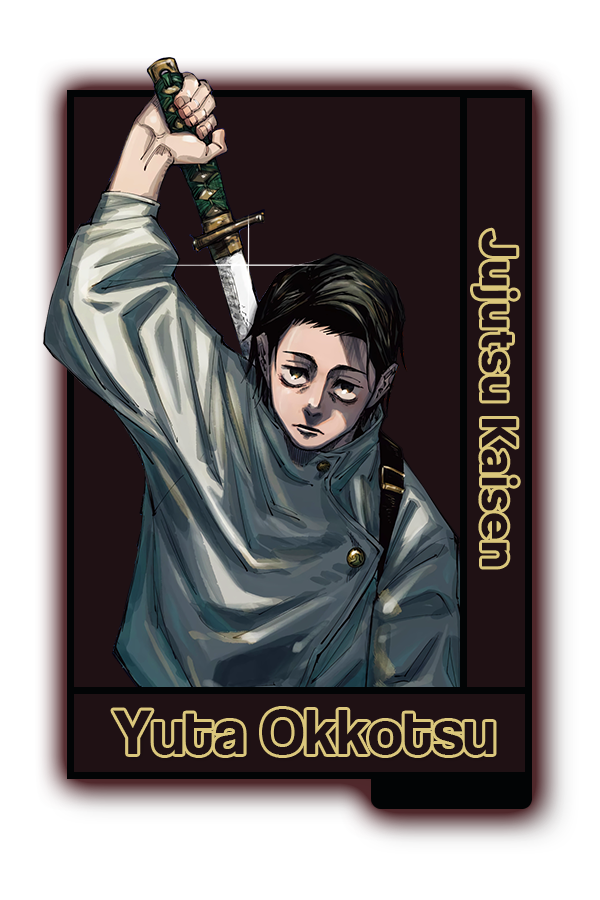
<style>
.page{position:relative;width:600px;height:900px;background:#1f1114}
.page>*{position:absolute;margin:0}
.t1{font:48.8px "MADETOMMY-Bold";color:#1e1214}
.t2{font:65.2px "CoolveticaRg-Regular";color:#1e1214}
</style>
<div class="page">
<p class="t1" style="left:473px;top:230px;width:45px;height:337px;rotate:90deg">Jujutsu Kaisen</p>
<p class="t2" style="left:113px;top:709px;width:381px;height:46px">Yuta Okkotsu</p>
</div>
